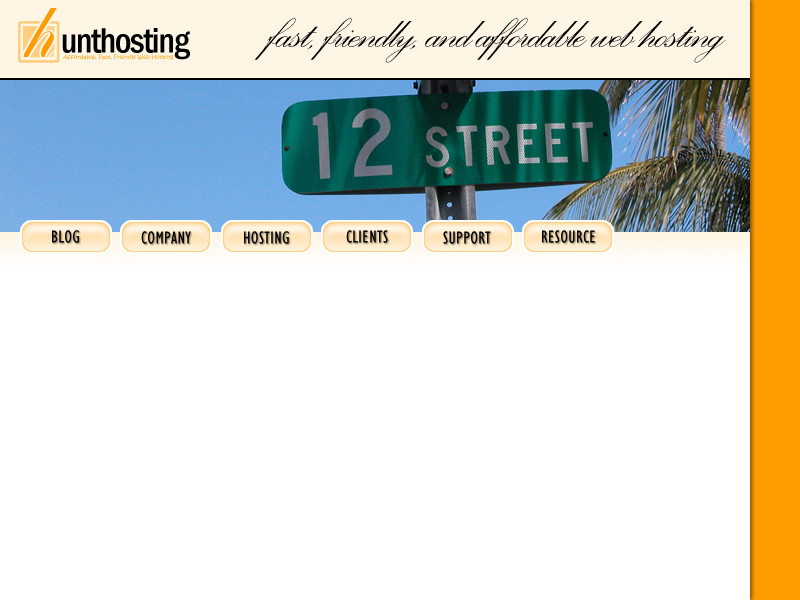
<style>
.page{position:relative;width:800px;height:600px;background:#ffffff}
.page>*{position:absolute;margin:0}
.t1{font:60px "PalaceScriptMT";letter-spacing:-0.04em;color:#000000}
.t2{font:18px "GillSansMT-Condensed";letter-spacing:0.02em;color:#000000}
</style>
<div class="page">
<p class="t1" style="left:254px;top:18px;width:472px;height:45px">fast, friendly, and affordable web hosting</p>
<p class="t2" style="left:52px;top:230px;width:27px;height:13px">BLOG</p>
<p class="t2" style="left:141px;top:231px;width:50px;height:13px">COMPANY</p>
<p class="t2" style="left:244px;top:231px;width:45px;height:13px">HOSTING</p>
<p class="t2" style="left:346px;top:230px;width:42px;height:13px">CLIENTS</p>
<p class="t2" style="left:443px;top:231px;width:48px;height:13px">SUPPORT</p>
<p class="t2" style="left:542px;top:230px;width:53px;height:13px">RESOURCE</p>
</div>
